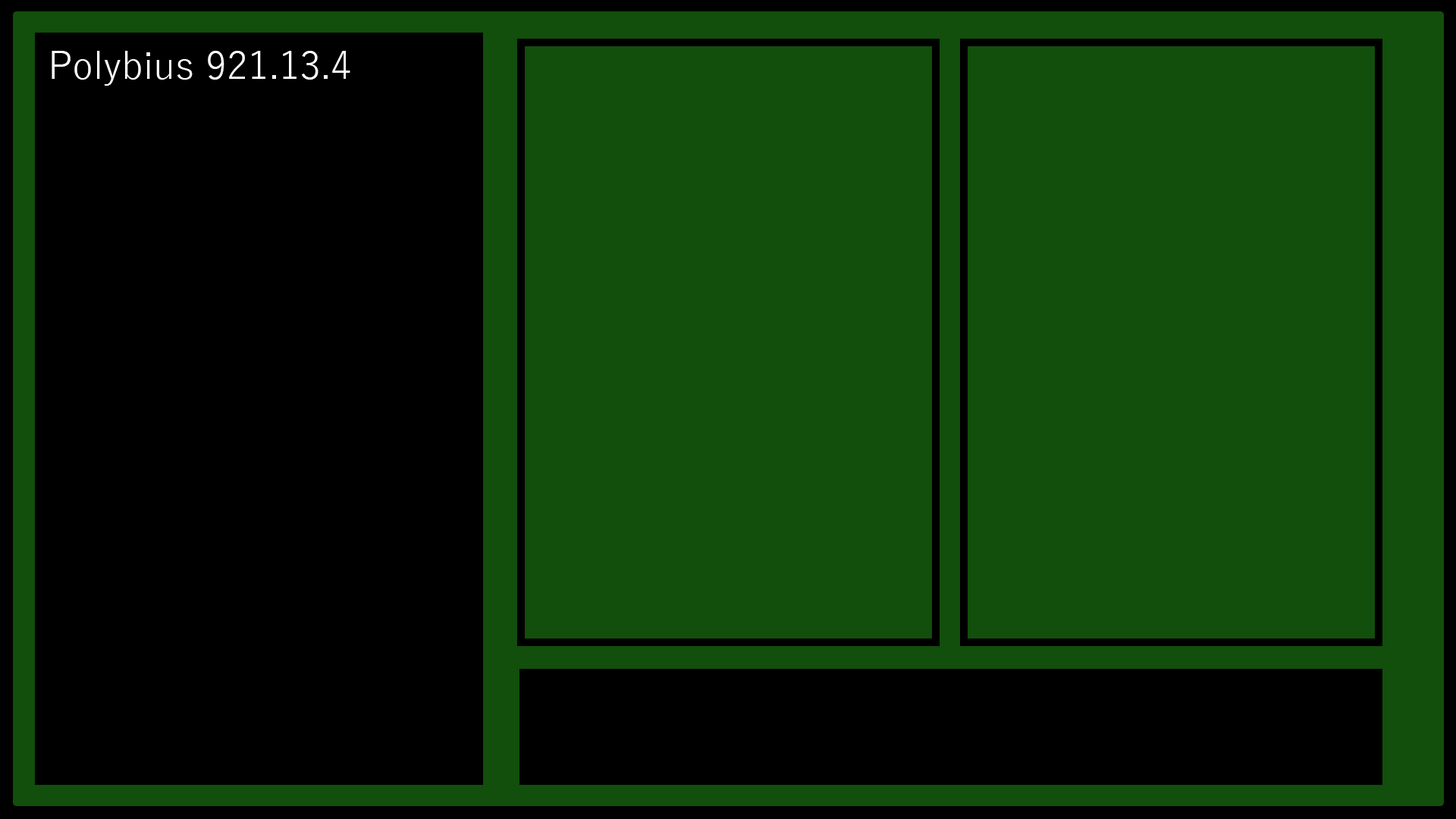
<style>
.page{position:relative;width:1456px;height:819px;background:#124e0c}
.page>*{position:absolute;margin:0}
.t1{font:37.9px "YuGothic-Regular";color:#ffffff}
</style>
<div class="page">
<p class="t1" style="left:52px;top:51px;width:298px;height:35px">Polybius 921.13.4</p>
</div>
